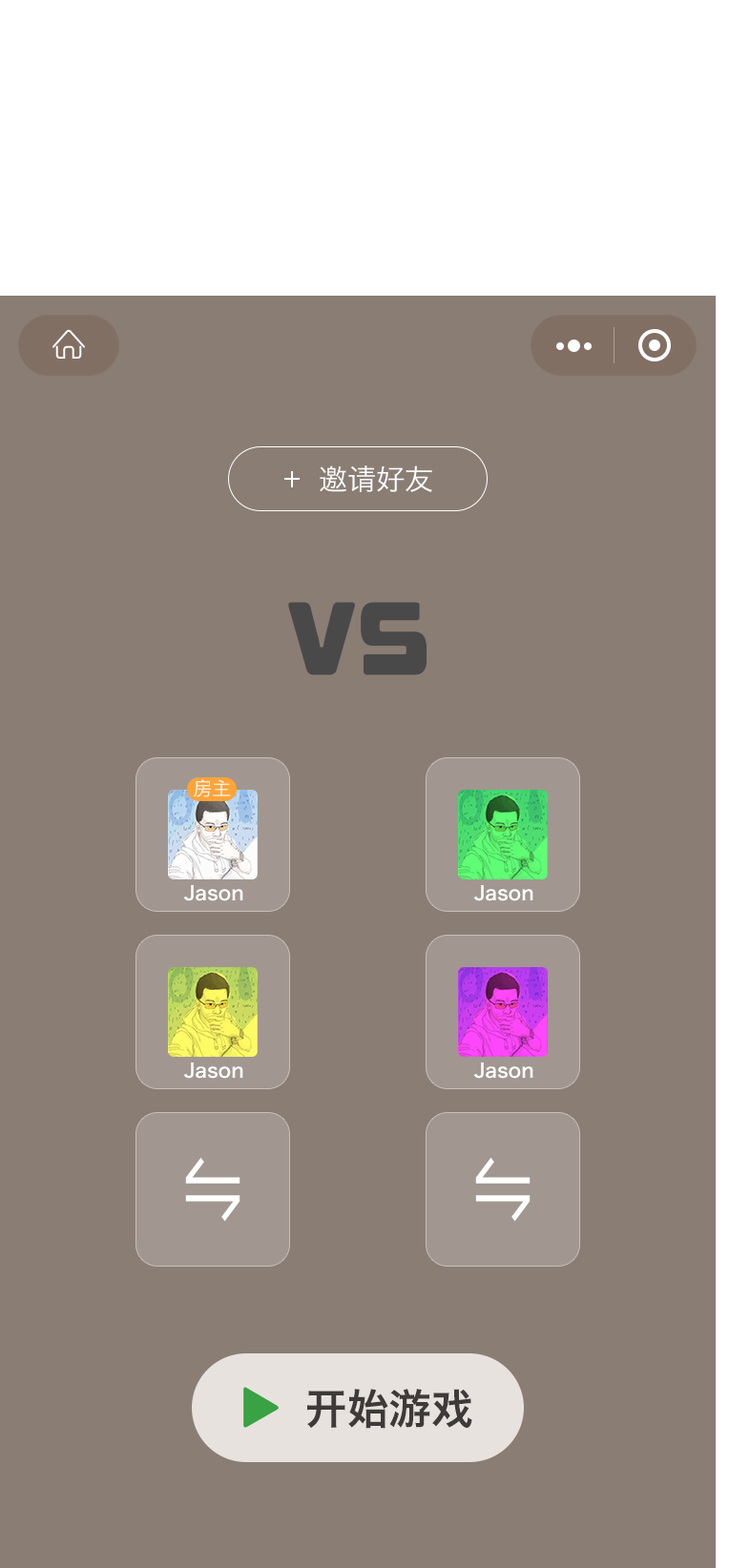
<style>
.page{position:relative;width:729px;height:1568px;background:#8a7d74}
.page>*{position:absolute;margin:0}
.t1{font:28.6px "HiraginoSansGB-W3";color:#ffffff}
.t2{font:19.1px "HiraginoSansGB-W3";color:#ffffff}
.t3{font:19.1px "HiraginoSansGB-W6";color:#ffffff}
.t4{font:42px "HiraginoSansGB-W6";color:#3e3a3a}
</style>
<div class="page">
<p class="t1" style="left:320px;top:465px;width:112px;height:27px">邀请好友</p>
<p class="t2" style="left:194px;top:779px;width:37px;height:18px">房主</p>
<p class="t3" style="left:183px;top:885px;width:60px;height:16px">Jason</p>
<p class="t3" style="left:473px;top:885px;width:60px;height:16px">Jason</p>
<p class="t3" style="left:183px;top:1063px;width:60px;height:16px">Jason</p>
<p class="t3" style="left:473px;top:1063px;width:60px;height:16px">Jason</p>
<p class="t4" style="left:307px;top:1389px;width:165px;height:40px">开始游戏</p>
</div>
